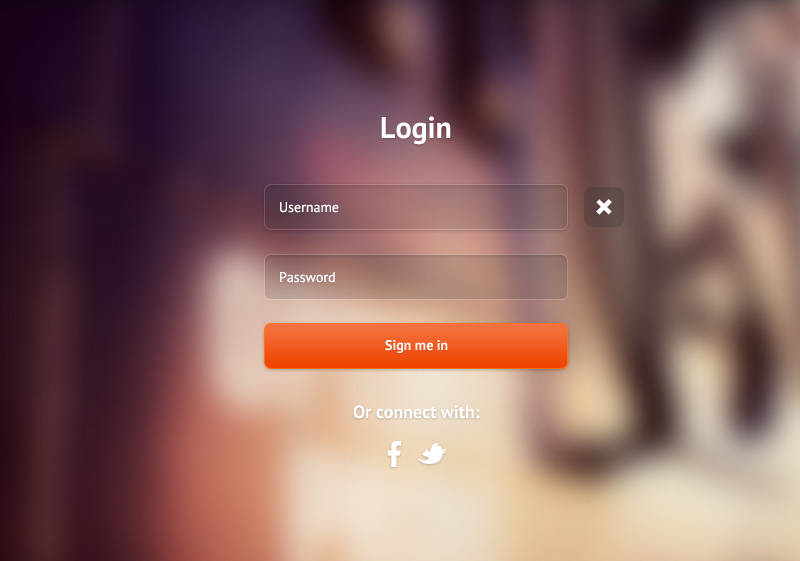
<style>
.page{position:relative;width:800px;height:561px}
.page>*{position:absolute;margin:0}
.t1{font:30px "PTSans-Bold";color:#ffffff}
.t2{font:14px "PTSans-Regular";color:#ffffff}
.t3{font:40px "PTSans-Bold";color:#ffffff}
.t4{font:14px "PTSans-Bold";color:#ffffff}
.t5{font:18px "PTSans-Bold";color:#ffffff}
</style>
<div class="page">
<p class="t1" style="left:381px;top:116px;width:70px;height:29px">Login</p>
<p class="t2" style="left:280px;top:202px;width:59px;height:11px">Username</p>
<p class="t3" style="left:596px;top:199px;width:16px;height:16px;rotate:45deg">+</p>
<p class="t2" style="left:280px;top:272px;width:55px;height:11px">Password</p>
<p class="t4" style="left:385px;top:340px;width:63px;height:13px">Sign me in</p>
<p class="t5" style="left:353px;top:405px;width:127px;height:14px">Or connect with:</p>
</div>
